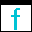
<style>
.page{position:relative;width:32px;height:32px;background:#ffffff}
.page>*{position:absolute;margin:0}
.t1{font:30px "HelveticaNeue";color:#00c3d5}
</style>
<div class="page">
<p class="t1" style="left:11px;top:8px;width:9px;height:22px">f</p>
</div>
